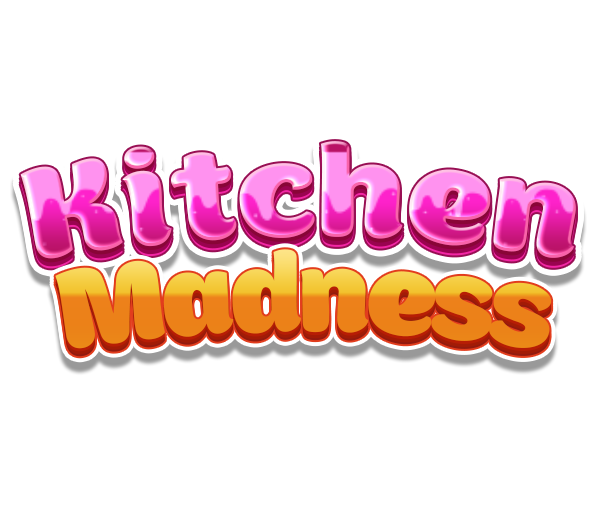
<style>
.page{position:relative;width:601px;height:512px;background:#ffffff}
.page>*{position:absolute;margin:0}
.t1{font:145.5px "Boomboom"}
.t2{font:124.7px "Boomboom";letter-spacing:-0.04em}
</style>
<div class="page">
<p class="t1" style="left:20px;top:141px;width:556px;height:118px">Kitchen</p>
<p class="t2" style="left:55px;top:249px;width:497px;height:100px">Madness</p>
</div>
